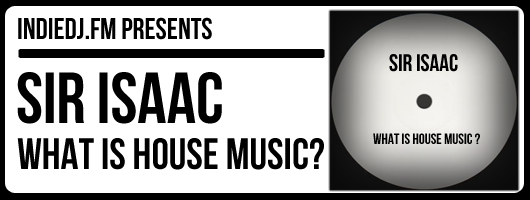
<style>
.page{position:relative;width:530px;height:200px;background:#ffffff}
.page>*{position:absolute;margin:0}
.t1{font:30px "BebasNeue";color:#000000}
.t2{font:24px "BebasNeue";color:#000000}
.t3{font:72px "BebasNeue";color:#000000}
.t4{font:15px "BebasNeue";color:#000000}
.t5{font:44px "BebasNeue";color:#000000}
</style>
<div class="page">
<p class="t1" style="left:18px;top:17px;width:194px;height:23px">indiedj.fm presents</p>
<p class="t2" style="left:389px;top:54px;width:69px;height:18px">Sir Isaac</p>
<p class="t3" style="left:17px;top:72px;width:205px;height:52px">sir isaac</p>
<p class="t4" style="left:373px;top:133px;width:107px;height:11px">What is house music ?</p>
<p class="t5" style="left:17px;top:138px;width:307px;height:32px">what is house music?</p>
</div>
